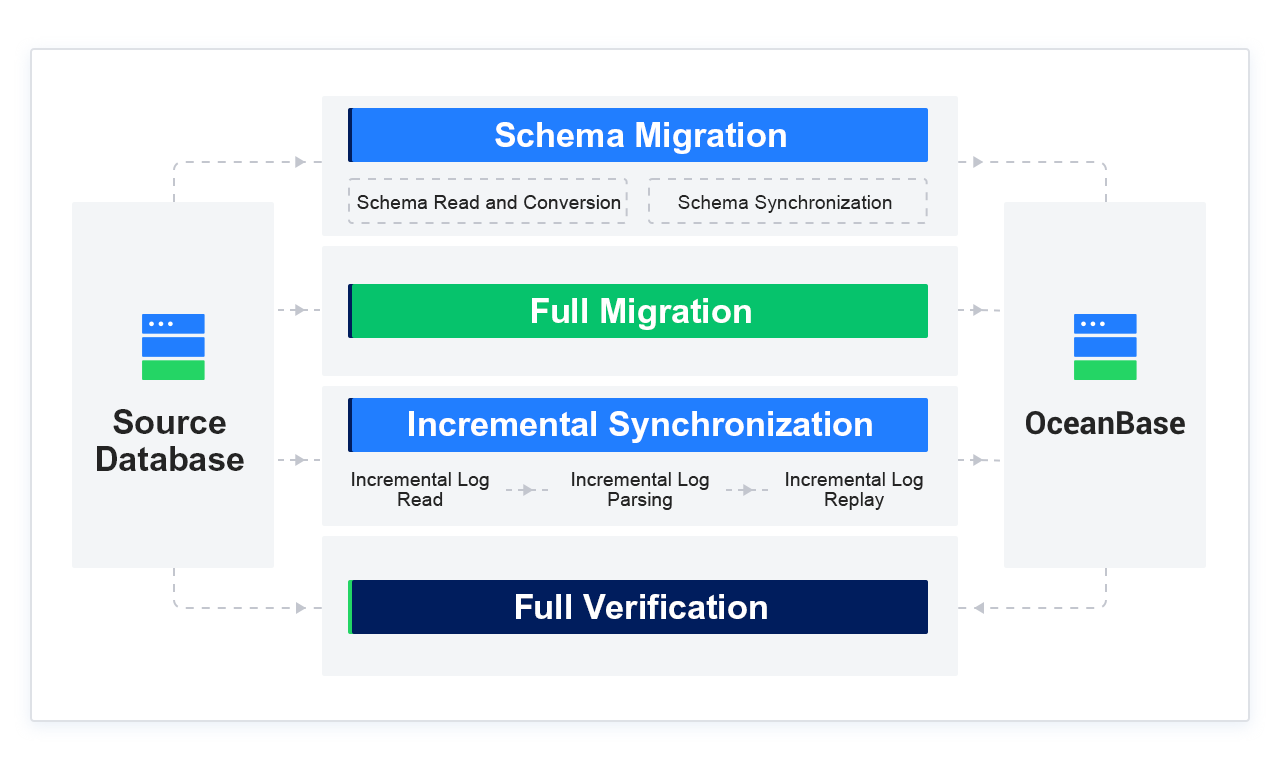
<style>
.page{position:relative;width:1280px;height:768px;background:#ffffff}
.page>*{position:absolute;margin:0}
.t1{font:34.1px "Arial-BoldMT";color:#ffffff}
.t2{font:19.4px "ArialMT";color:#242424}
.t3{font:34.1px/36.7px "Arial-BoldMT";color:#242424}
.t4{font:19.4px/20.9px "ArialMT";color:#242424}
</style>
<div class="page">
<p class="t1" style="left:495px;top:122px;width:291px;height:32px">Schema Migration</p>
<p class="t2" style="left:357px;top:195px;width:264px;height:14px">Schema Read and Conversion</p>
<p class="t2" style="left:678px;top:195px;width:214px;height:18px">Schema Synchronization</p>
<p class="t1" style="left:532px;top:298px;width:219px;height:32px">Full Migration</p>
<p class="t3" style="left:97px;top:409px;width:147px;height:62px;text-align:center">Source<br>Database</p>
<p class="t1" style="left:409px;top:411px;width:463px;height:32px">Incremental Synchronization</p>
<p class="t4" style="left:352px;top:472px;width:137px;height:34px;text-align:center">Incremental Log<br>Read</p>
<p class="t4" style="left:572px;top:472px;width:137px;height:38px;text-align:center">Incremental Log<br>Parsing</p>
<p class="t4" style="left:786px;top:472px;width:137px;height:38px;text-align:center">Incremental Log<br>Replay</p>
<p class="t1" style="left:516px;top:594px;width:251px;height:25px">Full Verification</p>
</div>
